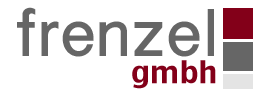
<style>
.page{position:relative;width:260px;height:102px;background:#ffffff}
.page>*{position:absolute;margin:0}
.t1{font:60px "BanglaSangamMN-Bold";color:#666666}
.t2{font:30px "CharcoalCY";color:#830019}
</style>
<div class="page">
<p class="t1" style="left:17px;top:7px;width:197px;height:50px">frenzel</p>
<p class="t2" style="left:132px;top:60px;width:84px;height:29px">gmbh</p>
</div>
